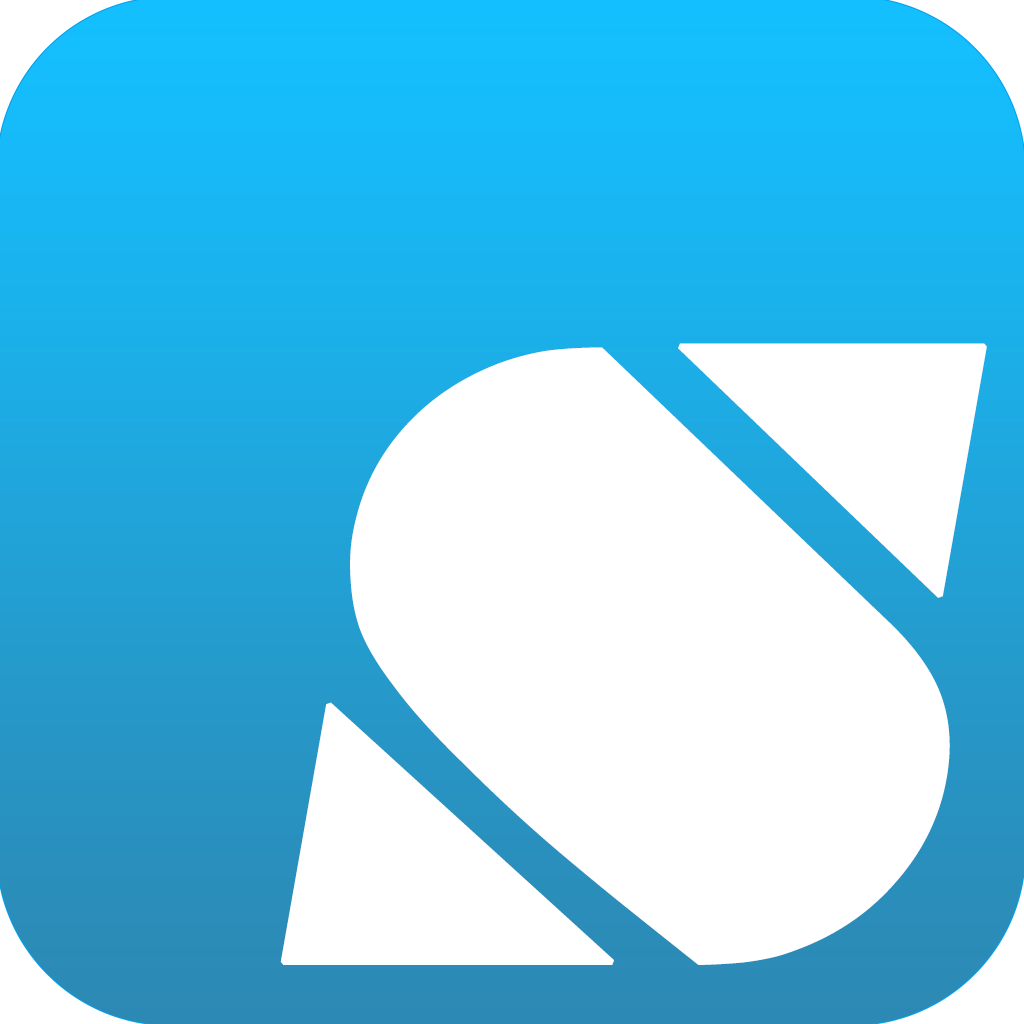
<style>
.page{position:relative;width:1024px;height:1024px;background:#ffffff}
.page>*{position:absolute;margin:0}
.t1{font:800px "Braggadocio";letter-spacing:0.02em;color:#ffffff;font-weight:bold;font-style:italic}
</style>
<div class="page">
<p class="t1" style="left:280px;top:343px;width:707px;height:622px">S</p>
</div>
